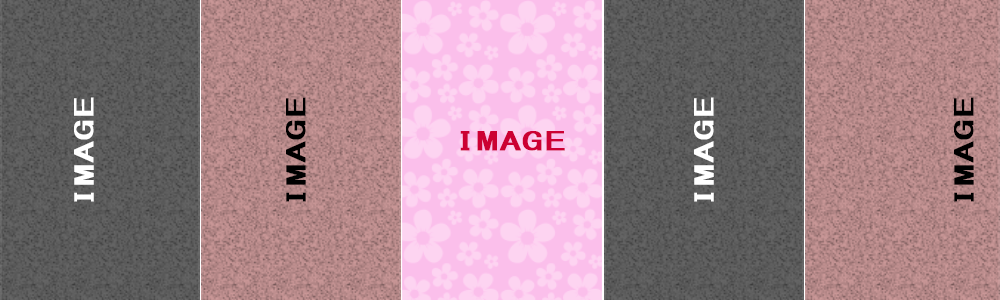
<style>
.page{position:relative;width:1000px;height:300px}
.page>*{position:absolute;margin:0}
.t1{font:24.8px "MS-Gothic";color:#ffffff;font-weight:bold;scale:1.72 1}
.t2{font:24.8px "MS-Gothic";color:#000000;font-weight:bold;scale:1.72 1}
.t3{font:24.8px "MS-Gothic";color:#cc0033;font-weight:bold;scale:1.72 1}
</style>
<div class="page">
<p class="t1" style="left:74px;top:97px;width:20px;height:105px;rotate:-90deg">IMAGE</p>
<p class="t2" style="left:286px;top:97px;width:20px;height:105px;rotate:-90deg">IMAGE</p>
<p class="t1" style="left:694px;top:97px;width:20px;height:105px;rotate:-90deg">IMAGE</p>
<p class="t2" style="left:954px;top:97px;width:20px;height:105px;rotate:-90deg">IMAGE</p>
<p class="t3" style="left:460px;top:131px;width:105px;height:20px">IMAGE</p>
</div>
